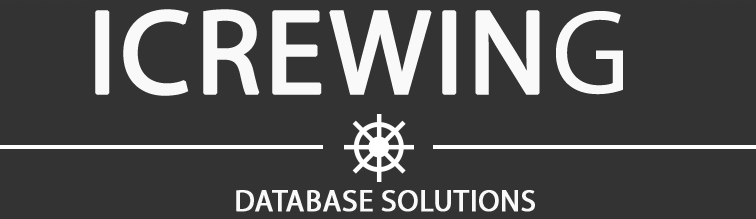
<style>
.page{position:relative;width:756px;height:219px;background:#333333}
.page>*{position:absolute;margin:0}
.t1{font:120px "MyriadPro-Regular";letter-spacing:0.01em;color:#f9f9f9;font-weight:bold}
.t2{font:30px "MyriadPro-Regular";letter-spacing:0.01em;color:#f9f9f9;font-weight:bold}
</style>
<div class="page">
<p class="t1" style="left:95px;top:9px;width:528px;height:87px">ICREWING</p>
<p class="t2" style="left:236px;top:190px;width:299px;height:22px">DATABASE SOLUTIONS</p>
</div>
